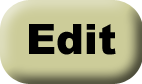
<style>
.page{position:relative;width:142px;height:84px;background:#cccc99}
.page>*{position:absolute;margin:0}
.t1{font:41.7px "Arial-Black";color:#000000}
</style>
<div class="page">
<p class="t1" style="left:29px;top:24px;width:87px;height:31px">Edit</p>
</div>
